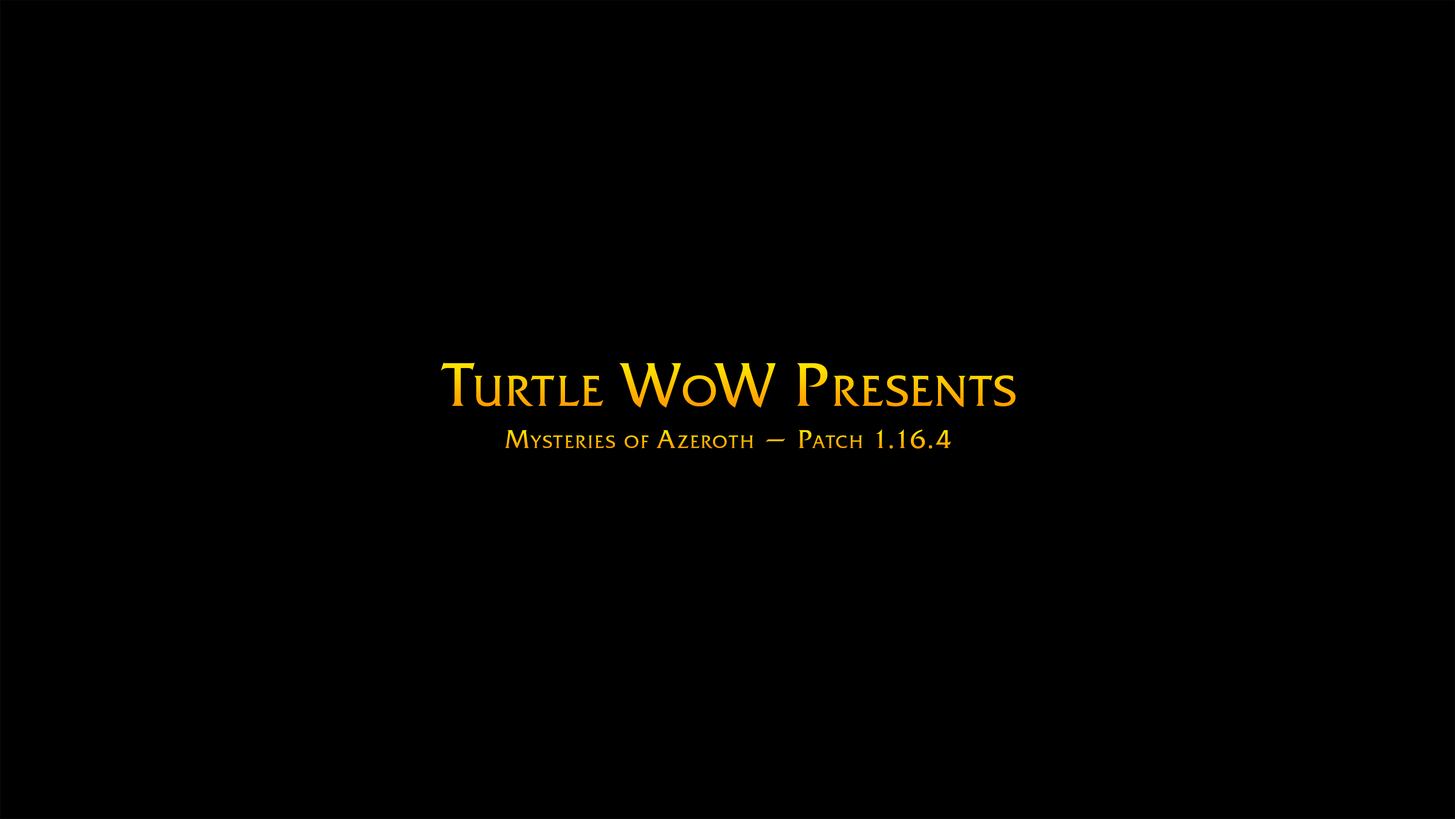
<style>
.page{position:relative;width:1455px;height:819px;background:#000000}
.page>*{position:absolute;margin:0}
.t1{font:61px "FrizQuadrataC";letter-spacing:0.05em;font-variant:small-caps}
.t2{font:25.4px "FrizQuadrataC";letter-spacing:0.075em;font-variant:small-caps}
</style>
<div class="page">
<p class="t1" style="left:441px;top:363px;width:575px;height:45px">Turtle WoW Presents</p>
<p class="t2" style="left:505px;top:429px;width:446px;height:20px">Mysteries of Azeroth — Patch 1.16.4</p>
</div>
